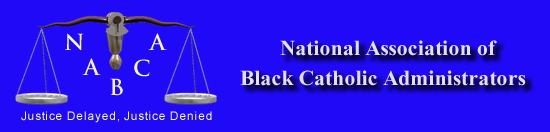
<style>
.page{position:relative;width:550px;height:132px;background:#1f09f7}
.page>*{position:absolute;margin:0}
.t1{font:21.7px "TrajanPro-Bold";letter-spacing:-0.05em;color:#f9f9f8}
.t2{font:27.7px "Kokila-Bold";letter-spacing:0.005em;color:#e3e2ea}
.t3{font:11.9px "ArialMT";letter-spacing:0.05em;color:#f9f9f8}
</style>
<div class="page">
<p class="t1" style="left:65px;top:33px;width:19px;height:18px">N</p>
<p class="t1" style="left:148px;top:33px;width:19px;height:17px">A</p>
<p class="t2" style="left:280px;top:40px;width:217px;height:16px">National Association of</p>
<p class="t1" style="left:82px;top:58px;width:19px;height:17px">A</p>
<p class="t1" style="left:134px;top:59px;width:16px;height:18px">C</p>
<p class="t1" style="left:110px;top:78px;width:13px;height:18px">B</p>
<p class="t2" style="left:240px;top:70px;width:286px;height:16px">Black Catholic Administrators</p>
<p class="t3" style="left:21px;top:111px;width:191px;height:12px">Justice Delayed, Justice Denied</p>
</div>
